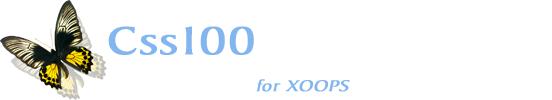
<style>
.page{position:relative;width:552px;height:100px;background:#ffffff}
.page>*{position:absolute;margin:0}
.t1{font:41.7px "BakerSignetBT-Roman";letter-spacing:0.025em;color:#83b5ee;font-weight:bold;scale:1.2 1}
.t2{font:16.7px "BakerSignetBT-Roman";letter-spacing:0.025em;color:#83b5ee;font-weight:bold;font-style:italic;scale:1.2 1}
</style>
<div class="page">
<p class="t1" style="left:108px;top:26px;width:146px;height:29px">Css100</p>
<p class="t2" style="left:256px;top:79px;width:94px;height:13px">for XOOPS</p>
</div>
